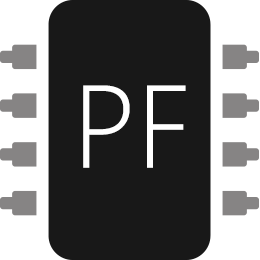
<style>
.page{position:relative;width:260px;height:260px;background:#181818}
.page>*{position:absolute;margin:0}
.t1{font:117.1px "SegoeUI-Light";color:#ffffff}
</style>
<div class="page">
<p class="t1" style="left:83px;top:85px;width:103px;height:83px">PF</p>
</div>
